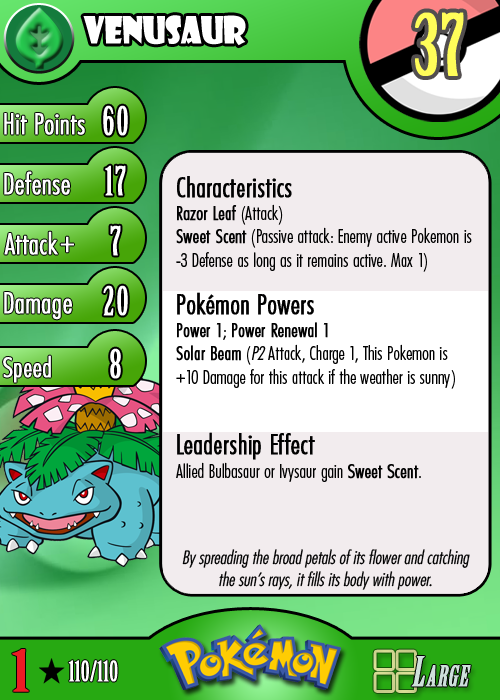
<style>
.page{position:relative;width:500px;height:700px;background:#f2ecee}
.page>*{position:absolute;margin:0}
.t1{font:36.7px "ShowcardGothic-Reg";letter-spacing:-0.025em;color:#ffffff;scale:0.91 1}
.t2{font:83.3px "BirchStd";letter-spacing:0.025em;color:#fffd59;font-weight:bold}
.t3{font:27.8px "Futura-CondensedLight";color:#ffffff;font-weight:bold}
.t4{font:38.9px "BirchStd";letter-spacing:0.035em;color:#ffffff;font-weight:bold}
.t5{font:19.4px "FuturaCondensedBQ-Light";color:#010101}
.t6{font:27.8px "FuturaCondensedBQ-Light";color:#010101;font-weight:bold}
.t7{font:19.4px "FuturaCondensedBQ-Light";color:#010101;font-weight:bold}
.t8{font:19.4px "FuturaCondensedBQ-Light";color:#010101;font-style:italic}
.t9{font:30.6px "Futura-CondensedLight";color:#ffffff;font-weight:bold}
.t10{font:27.8px "FuturaCondensedBQ-Light";color:#ffffff;font-weight:bold}
.t11{font:18.1px "Futura-CondensedLight";color:#010101;font-style:italic}
.t12{font:55.6px "BirchStd";color:#ed1c24;font-weight:bold;scale:1.5 1}
.t13{font:27.8px "BirchStd";color:#ffffff;font-weight:bold}
</style>
<div class="page">
<p class="t1" style="left:83px;top:15px;width:163px;height:31px">venusaur</p>
<p class="t2" style="left:415px;top:12px;width:49px;height:64px">37</p>
<p class="t3" style="left:4px;top:113px;width:81px;height:22px">Hit Points</p>
<p class="t4" style="left:103px;top:105px;width:25px;height:31px">60</p>
<p class="t3" style="left:4px;top:171px;width:66px;height:24px">Defense</p>
<p class="t4" style="left:105px;top:165px;width:21px;height:31px">17</p>
<p class="t5" style="left:176px;top:176px;width:296px;height:306px"><span class="t6">Characteristics<br></span><span class="t7">Razor Leaf</span> (Attack)<br><span class="t7">Sweet Scent</span> (Passive attack: Enemy active Pokemon is -3 Defense as long as it remains active. Max 1)<br><span class="t6">Pokémon Powers<br></span><span class="t7">Power 1</span>; <span class="t7">Power Renewal 1<br>Solar Beam</span> (<span class="t8">P2</span> Attack, Charge 1, This Pokemon is +10 Damage for this attack if the weather is sunny)<br><br><span class="t6">Leadership Effect<br></span>Allied Bulbasaur or Ivysaur gain <span class="t7">Sweet Scent</span>.</p>
<p class="t3" style="left:4px;top:231px;width:54px;height:24px">Attack</p>
<p class="t4" style="left:110px;top:225px;width:11px;height:31px">7</p>
<p class="t9" style="left:60px;top:236px;width:14px;height:17px">+</p>
<p class="t3" style="left:4px;top:292px;width:68px;height:28px">Damage</p>
<p class="t4" style="left:103px;top:285px;width:25px;height:31px">20</p>
<p class="t4" style="left:110px;top:348px;width:11px;height:31px">8</p>
<p class="t10" style="left:3px;top:355px;width:48px;height:28px">Speed</p>
<p class="t11" style="left:182px;top:549px;width:288px;height:41px;text-align:center">By spreading the broad petals of its flower and catching the sun’s rays, it fills its body with power.</p>
<p class="t12" style="left:12px;top:649px;width:17px;height:43px">1</p>
<p class="t13" style="left:68px;top:660px;width:50px;height:22px">110/110</p>
</div>
